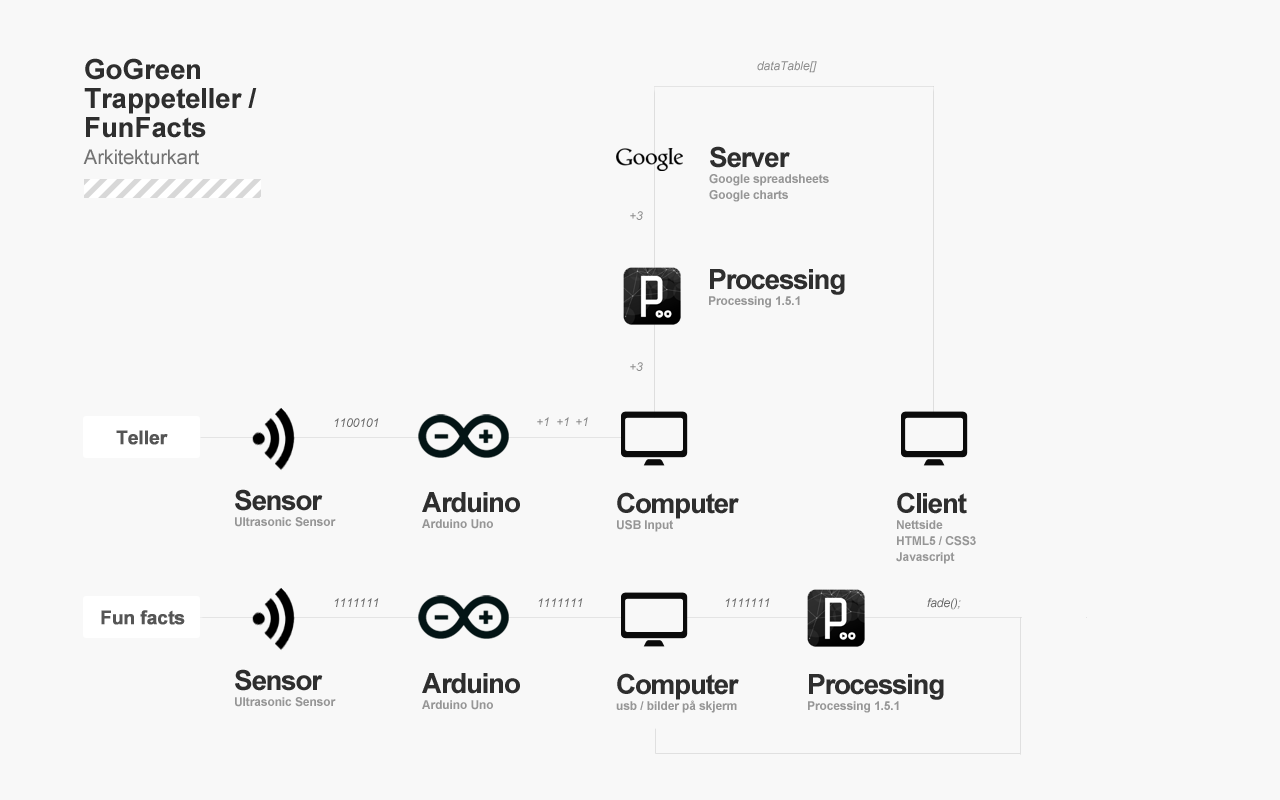
<style>
.page{position:relative;width:1280px;height:800px;background:#f8f8f8}
.page>*{position:absolute;margin:0}
.t1{font:28px/29px "Arial-BoldMT";letter-spacing:-0.01em;color:#2e2e2e}
.t2{font:20px/27px "ArialMT";letter-spacing:-0.01em;color:#737373}
.t3{font:12px "Arial-ItalicMT";letter-spacing:-0.01em;color:#8a8a8a}
.t4{font:12px/16px "Arial-BoldMT";letter-spacing:-0.01em;color:#969696}
.t5{font:28px/60px "Arial-BoldMT";letter-spacing:-0.05em;color:#2e2e2e}
.t6{font:12px "Arial-ItalicMT";letter-spacing:-0.01em;color:#6b6b6b}
.t7{font:12px "Arial-ItalicMT";letter-spacing:-0.01em;color:#878787}
.t8{font:18.9px "Arial-BoldMT";letter-spacing:-0.02em;color:#555555;font-weight:bold}
</style>
<div class="page">
<p class="t1" style="left:83px;top:58px;width:174px;height:107px">GoGreen <br>Trappeteller /<br>FunFacts<br><span class="t2">Arkitekturkart</span></p>
<p class="t3" style="left:757px;top:61px;width:60px;height:12px">dataTable[]</p>
<p class="t4" style="left:709px;top:146px;width:120px;height:56px"><span class="t5">Server<br></span>Google spreadsheets<br>Google charts</p>
<p class="t3" style="left:630px;top:211px;width:13px;height:9px">+3</p>
<p class="t4" style="left:709px;top:269px;width:136px;height:39px"><span class="t5">Processing<br></span>Processing 1.5.1</p>
<p class="t3" style="left:630px;top:362px;width:13px;height:9px">+3</p>
<p class="t6" style="left:334px;top:418px;width:45px;height:9px">1100101</p>
<p class="t7" style="left:537px;top:417px;width:12px;height:9px">+1</p>
<p class="t7" style="left:557px;top:417px;width:12px;height:9px">+1</p>
<p class="t7" style="left:576px;top:417px;width:12px;height:9px">+1</p>
<p class="t8" style="left:116px;top:430px;width:52px;height:15px">Teller</p>
<p class="t4" style="left:235px;top:489px;width:101px;height:38px"><span class="t5">Sensor<br></span>Ultrasonic Sensor</p>
<p class="t4" style="left:422px;top:492px;width:98px;height:37px"><span class="t5">Arduino<br></span>Arduino Uno</p>
<p class="t4" style="left:617px;top:492px;width:122px;height:40px"><span class="t5">Computer<br></span>USB Input</p>
<p class="t4" style="left:896px;top:492px;width:80px;height:72px"><span class="t5">Client<br></span>Nettside<br>HTML5 / CSS3<br>Javascript</p>
<p class="t6" style="left:334px;top:598px;width:45px;height:9px">1111111</p>
<p class="t6" style="left:538px;top:598px;width:45px;height:9px">1111111</p>
<p class="t6" style="left:725px;top:598px;width:45px;height:9px">1111111</p>
<p class="t6" style="left:927px;top:598px;width:34px;height:12px">fade();</p>
<p class="t8" style="left:101px;top:610px;width:84px;height:15px">Fun facts</p>
<p class="t4" style="left:235px;top:669px;width:101px;height:38px"><span class="t5">Sensor<br></span>Ultrasonic Sensor</p>
<p class="t4" style="left:422px;top:673px;width:98px;height:37px"><span class="t5">Arduino<br></span>Arduino Uno</p>
<p class="t4" style="left:616px;top:673px;width:123px;height:40px"><span class="t5">Computer<br></span>usb / bilder på skjerm</p>
<p class="t4" style="left:808px;top:674px;width:136px;height:39px"><span class="t5">Processing<br></span>Processing 1.5.1</p>
</div>
